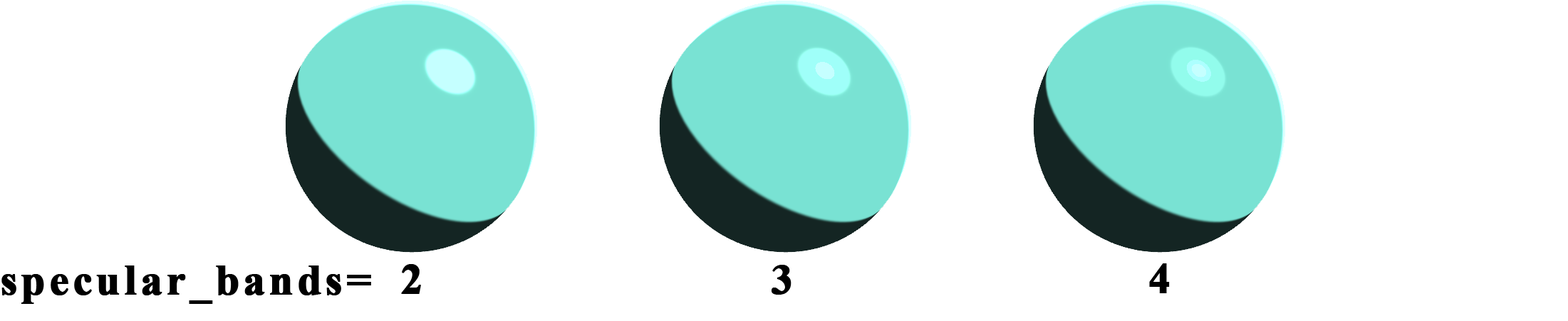
<style>
.page{position:relative;width:1568px;height:321px;background:#ffffff}
.page>*{position:absolute;margin:0}
.t1{font:42.7px "TimesNewRomanPS-BoldMT";letter-spacing:0.075em;color:#000000;font-weight:bold}
</style>
<div class="page">
<p class="t1" style="left:1px;top:266px;width:370px;height:38px">specular_bands=</p>
<p class="t1" style="left:401px;top:264px;width:20px;height:30px">2</p>
<p class="t1" style="left:772px;top:265px;width:19px;height:30px">3</p>
<p class="t1" style="left:1149px;top:264px;width:21px;height:30px">4</p>
</div>
